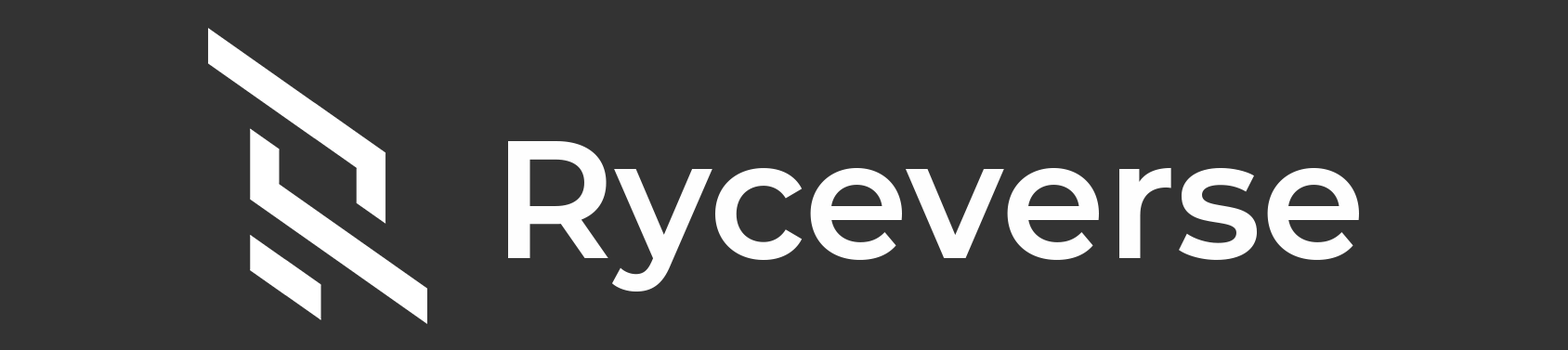
<style>
.page{position:relative;width:1568px;height:350px;background:#333333}
.page>*{position:absolute;margin:0}
.t1{font:167.3px "Montserrat-SemiBold";color:#fefefe}
</style>
<div class="page">
<p class="t1" style="left:508px;top:141px;width:851px;height:151px">Ryceverse</p>
</div>
